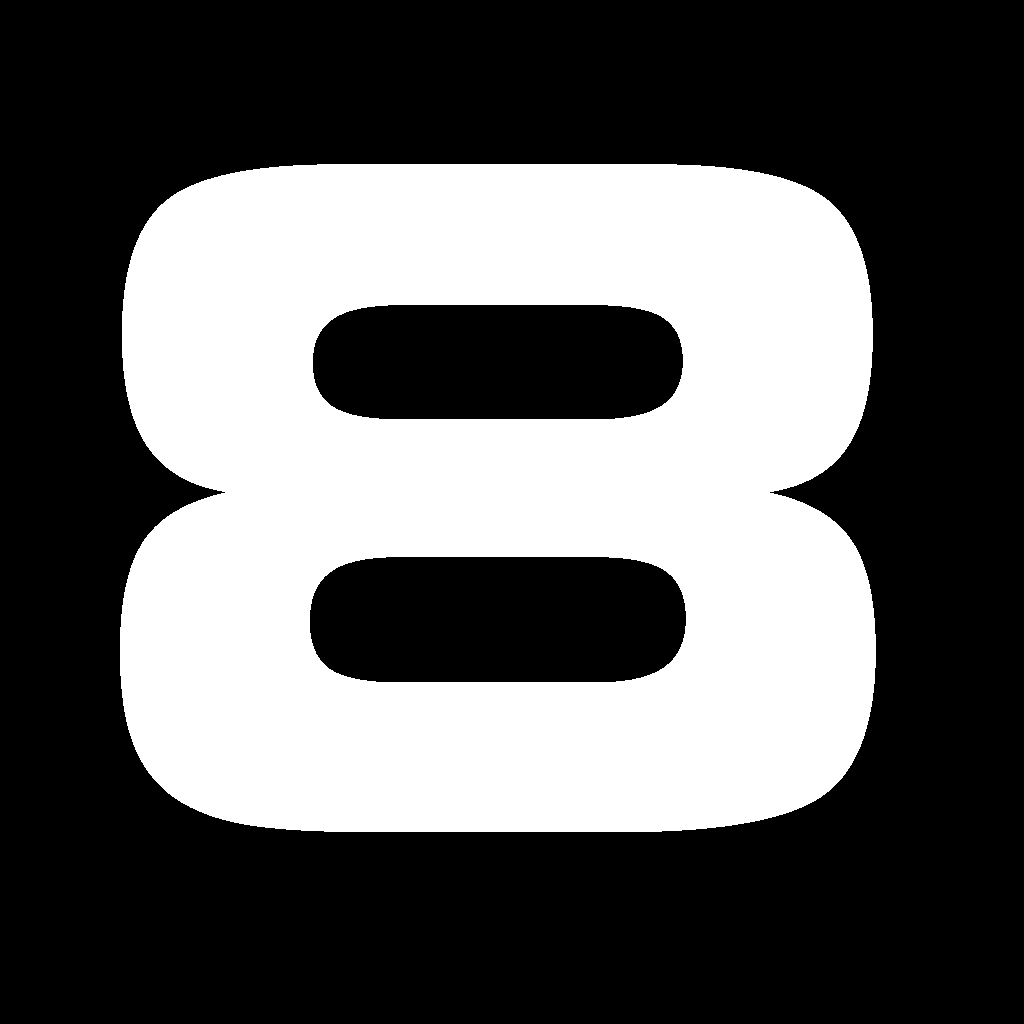
<style>
.page{position:relative;width:1024px;height:1024px;background:#000000}
.page>*{position:absolute;margin:0}
.t1{font:895.8px "Square721BT-BoldExtended";color:#ffffff}
</style>
<div class="page">
<p class="t1" style="left:120px;top:164px;width:756px;height:668px">8</p>
</div>
